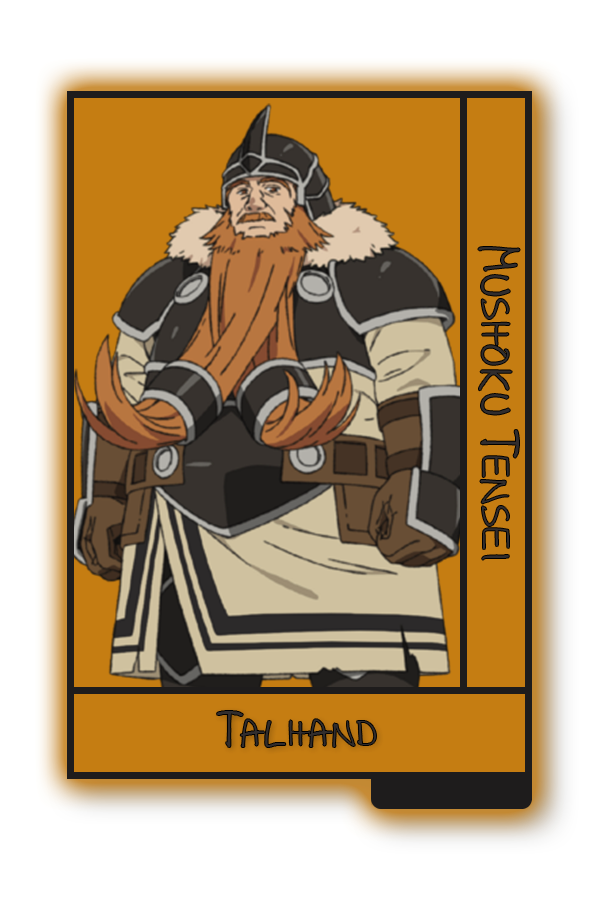
<style>
.page{position:relative;width:600px;height:900px;background:#c57d12}
.page>*{position:absolute;margin:0}
.t1{font:41px "AllCaps";color:#312d2d}
.t2{font:38.3px "AllCaps";color:#312d2d}
</style>
<div class="page">
<p class="t1" style="left:478px;top:247px;width:42px;height:313px;rotate:90deg">Mushoku Tensei</p>
<p class="t2" style="left:217px;top:711px;width:159px;height:36px">Talhand</p>
</div>
